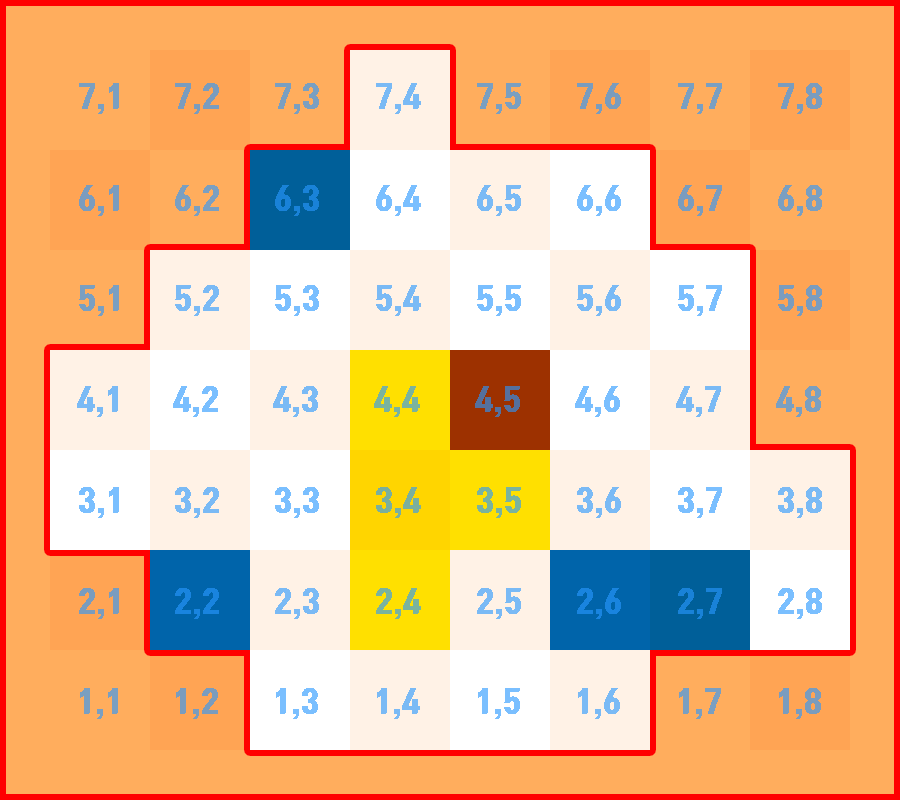
<style>
.page{position:relative;width:900px;height:800px;background:#ffad5d}
.page>*{position:absolute;margin:0}
.t1{font:30px "TmonMonsoriBlack";color:#7a9fc1}
.t2{font:30px "TmonMonsoriBlack";color:#7a9cbe}
.t3{font:30px "TmonMonsoriBlack";color:#7abaf5}
.t4{font:30px "TmonMonsoriBlack";color:#1982d8}
.t5{font:30px "TmonMonsoriBlack";color:#7abfff}
.t6{font:30px "TmonMonsoriBlack";color:#7ab39e}
.t7{font:30px "TmonMonsoriBlack";color:#55709e}
.t8{font:30px "TmonMonsoriBlack";color:#7aaf9e}
.t9{font:30px "TmonMonsoriBlack";color:#1984df}
</style>
<div class="page">
<p class="t1" style="left:79px;top:83px;width:40px;height:31px">7,1</p>
<p class="t2" style="left:175px;top:83px;width:44px;height:31px">7,2</p>
<p class="t1" style="left:275px;top:83px;width:44px;height:31px">7,3</p>
<p class="t3" style="left:376px;top:83px;width:45px;height:31px">7,4</p>
<p class="t1" style="left:477px;top:83px;width:44px;height:31px">7,5</p>
<p class="t2" style="left:577px;top:83px;width:44px;height:31px">7,6</p>
<p class="t1" style="left:678px;top:83px;width:44px;height:31px">7,7</p>
<p class="t2" style="left:778px;top:83px;width:44px;height:31px">7,8</p>
<p class="t2" style="left:79px;top:185px;width:40px;height:31px">6,1</p>
<p class="t1" style="left:175px;top:185px;width:44px;height:31px">6,2</p>
<p class="t4" style="left:275px;top:185px;width:44px;height:31px">6,3</p>
<p class="t5" style="left:376px;top:185px;width:45px;height:31px">6,4</p>
<p class="t3" style="left:477px;top:185px;width:44px;height:31px">6,5</p>
<p class="t5" style="left:577px;top:185px;width:44px;height:31px">6,6</p>
<p class="t2" style="left:678px;top:185px;width:44px;height:31px">6,7</p>
<p class="t1" style="left:778px;top:185px;width:44px;height:31px">6,8</p>
<p class="t1" style="left:79px;top:285px;width:40px;height:31px">5,1</p>
<p class="t3" style="left:175px;top:285px;width:44px;height:31px">5,2</p>
<p class="t5" style="left:275px;top:285px;width:44px;height:31px">5,3</p>
<p class="t3" style="left:376px;top:285px;width:45px;height:31px">5,4</p>
<p class="t5" style="left:477px;top:285px;width:44px;height:31px">5,5</p>
<p class="t3" style="left:577px;top:285px;width:44px;height:31px">5,6</p>
<p class="t5" style="left:678px;top:285px;width:44px;height:31px">5,7</p>
<p class="t2" style="left:778px;top:285px;width:44px;height:31px">5,8</p>
<p class="t3" style="left:77px;top:386px;width:41px;height:31px">4,1</p>
<p class="t5" style="left:173px;top:386px;width:45px;height:31px">4,2</p>
<p class="t3" style="left:273px;top:386px;width:45px;height:31px">4,3</p>
<p class="t6" style="left:374px;top:386px;width:46px;height:31px">4,4</p>
<p class="t7" style="left:475px;top:386px;width:45px;height:31px">4,5</p>
<p class="t5" style="left:575px;top:386px;width:45px;height:31px">4,6</p>
<p class="t3" style="left:676px;top:386px;width:45px;height:31px">4,7</p>
<p class="t1" style="left:776px;top:386px;width:45px;height:31px">4,8</p>
<p class="t5" style="left:79px;top:487px;width:40px;height:31px">3,1</p>
<p class="t3" style="left:175px;top:487px;width:44px;height:31px">3,2</p>
<p class="t5" style="left:275px;top:487px;width:44px;height:31px">3,3</p>
<p class="t8" style="left:376px;top:487px;width:45px;height:31px">3,4</p>
<p class="t6" style="left:477px;top:487px;width:44px;height:31px">3,5</p>
<p class="t3" style="left:577px;top:487px;width:44px;height:31px">3,6</p>
<p class="t5" style="left:678px;top:487px;width:44px;height:31px">3,7</p>
<p class="t3" style="left:778px;top:487px;width:44px;height:31px">3,8</p>
<p class="t2" style="left:79px;top:588px;width:40px;height:31px">2,1</p>
<p class="t9" style="left:175px;top:588px;width:44px;height:31px">2,2</p>
<p class="t3" style="left:275px;top:588px;width:44px;height:31px">2,3</p>
<p class="t6" style="left:376px;top:588px;width:45px;height:31px">2,4</p>
<p class="t3" style="left:477px;top:588px;width:44px;height:31px">2,5</p>
<p class="t9" style="left:577px;top:588px;width:44px;height:31px">2,6</p>
<p class="t4" style="left:678px;top:588px;width:44px;height:31px">2,7</p>
<p class="t5" style="left:778px;top:588px;width:44px;height:31px">2,8</p>
<p class="t1" style="left:80px;top:688px;width:38px;height:31px">1,1</p>
<p class="t2" style="left:176px;top:688px;width:42px;height:31px">1,2</p>
<p class="t5" style="left:276px;top:688px;width:42px;height:31px">1,3</p>
<p class="t3" style="left:377px;top:688px;width:43px;height:31px">1,4</p>
<p class="t5" style="left:478px;top:688px;width:42px;height:31px">1,5</p>
<p class="t3" style="left:578px;top:688px;width:42px;height:31px">1,6</p>
<p class="t1" style="left:679px;top:688px;width:42px;height:31px">1,7</p>
<p class="t2" style="left:779px;top:688px;width:42px;height:31px">1,8</p>
</div>
